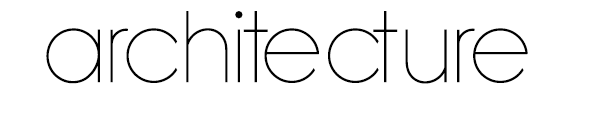
<style>
.page{position:relative;width:600px;height:120px;background:#ffffff}
.page>*{position:absolute;margin:0}
.t1{font:70.8px "BondoluoPeek";color:#000000}
</style>
<div class="page">
<p class="t1" style="left:46px;top:11px;width:482px;height:73px">architecture</p>
</div>
